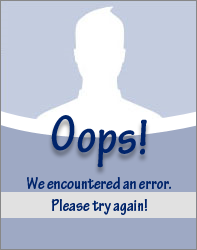
<style>
.page{position:relative;width:197px;height:250px;background:#9ea9c4}
.page>*{position:absolute;margin:0}
.t1{font:51.4px "TektonPro-BoldCond";color:#00246b}
.t2{font:17.8px "TektonPro-BoldCond";color:#00246b}
</style>
<div class="page">
<p class="t1" style="left:51px;top:115px;width:96px;height:53px;rotate:3deg">Oops!</p>
<p class="t2" style="left:27px;top:177px;width:144px;height:38px;text-align:center">We encountered an error.<br>Please try again!</p>
</div>
